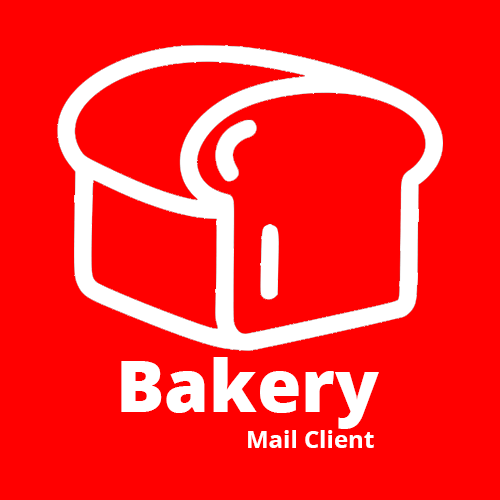
<style>
.page{position:relative;width:500px;height:500px;background:#ff0000}
.page>*{position:absolute;margin:0}
.t1{font:72px "OpenSans-ExtraBold";color:#ffffff}
.t2{font:24px "OpenSans-Bold";color:#ffffff}
</style>
<div class="page">
<p class="t1" style="left:121px;top:357px;width:258px;height:72px">Bakery</p>
<p class="t2" style="left:248px;top:430px;width:126px;height:18px">Mail Client</p>
</div>
